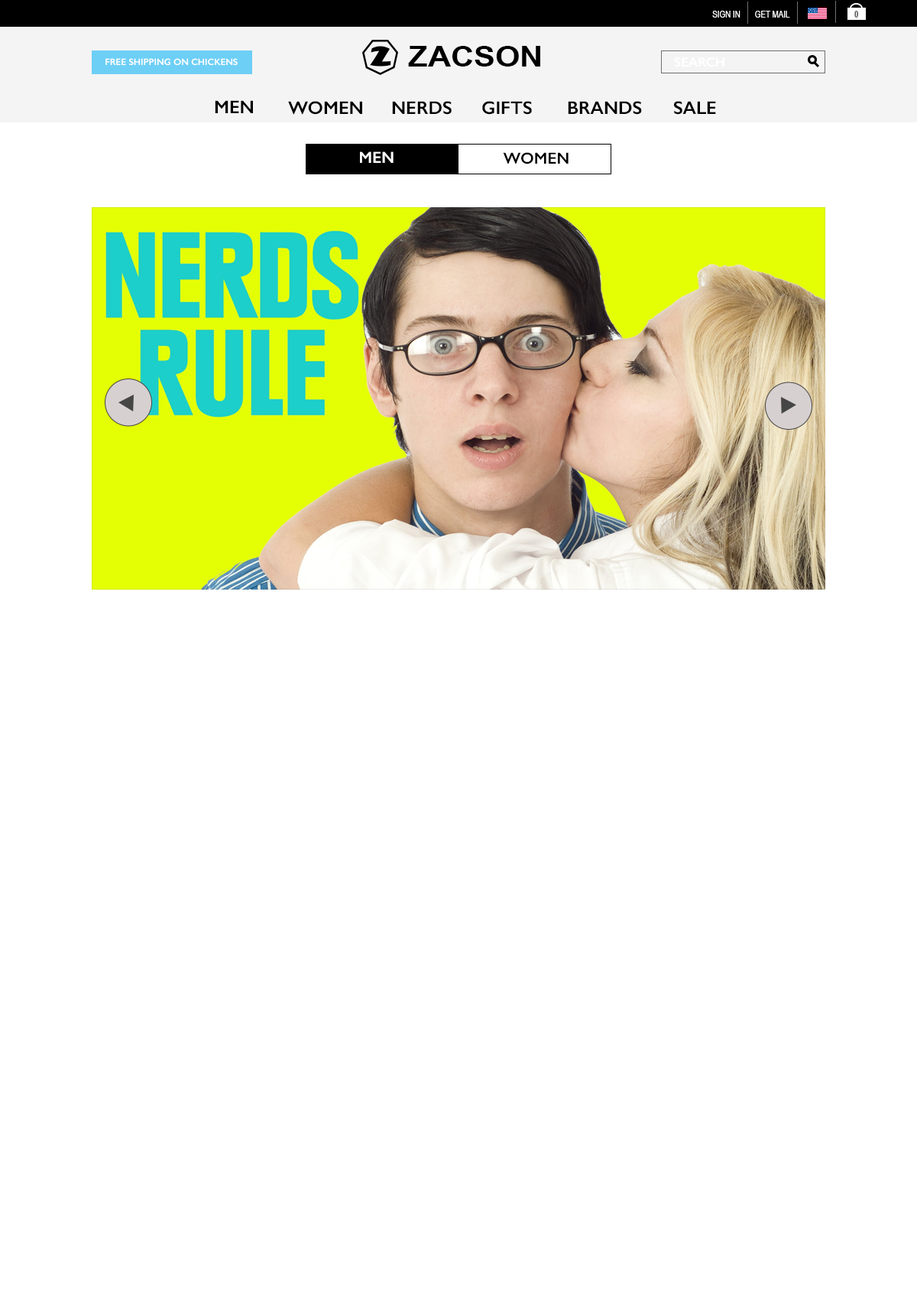
<style>
.page{position:relative;width:917px;height:1300px;background:#ffffff}
.page>*{position:absolute;margin:0}
.t1{font:9.2px "ArialNarrow";color:#ffffff}
.t2{font:9.2px "ArialNarrow-Bold";color:#606060}
.t3{font:21.4px "GillSans-UltraBold";color:#000000}
.t4{font:29.2px "ArialNarrow-Bold";color:#000000;scale:1.33 1}
.t5{font:9.2px "GillSans-SemiBold";color:#ffffff}
.t6{font:13px "GillSans-SemiBold";color:#ffffff}
.t7{font:18.3px "GillSans-SemiBold";color:#010101}
.t8{font:16.1px "GillSans-SemiBold";color:#ffffff}
.t9{font:16.1px "GillSans-SemiBold";color:#000000}
</style>
<div class="page">
<p class="t1" style="left:713px;top:11px;width:28px;height:7px">SIGN IN</p>
<p class="t1" style="left:755px;top:11px;width:36px;height:7px">GET MAIL</p>
<p class="t2" style="left:855px;top:11px;width:4px;height:7px">0</p>
<p class="t3" style="left:370px;top:46px;width:21px;height:21px">Z</p>
<p class="t4" style="left:408px;top:46px;width:133px;height:21px">ZACSON</p>
<p class="t5" style="left:106px;top:58px;width:132px;height:8px">FREE SHIPPING ON CHICKENS</p>
<p class="t6" style="left:674px;top:57px;width:51px;height:10px">SEARCH</p>
<p class="t7" style="left:215px;top:100px;width:38px;height:13px">MEN</p>
<p class="t7" style="left:288px;top:101px;width:74px;height:14px">WOMEN</p>
<p class="t7" style="left:392px;top:101px;width:60px;height:14px">NERDS</p>
<p class="t7" style="left:482px;top:101px;width:50px;height:14px">GIFTS</p>
<p class="t7" style="left:568px;top:101px;width:74px;height:14px">BRANDS</p>
<p class="t7" style="left:674px;top:101px;width:42px;height:14px">SALE</p>
<p class="t8" style="left:360px;top:151px;width:34px;height:12px">MEN</p>
<p class="t9" style="left:503px;top:152px;width:66px;height:12px">WOMEN</p>
</div>
